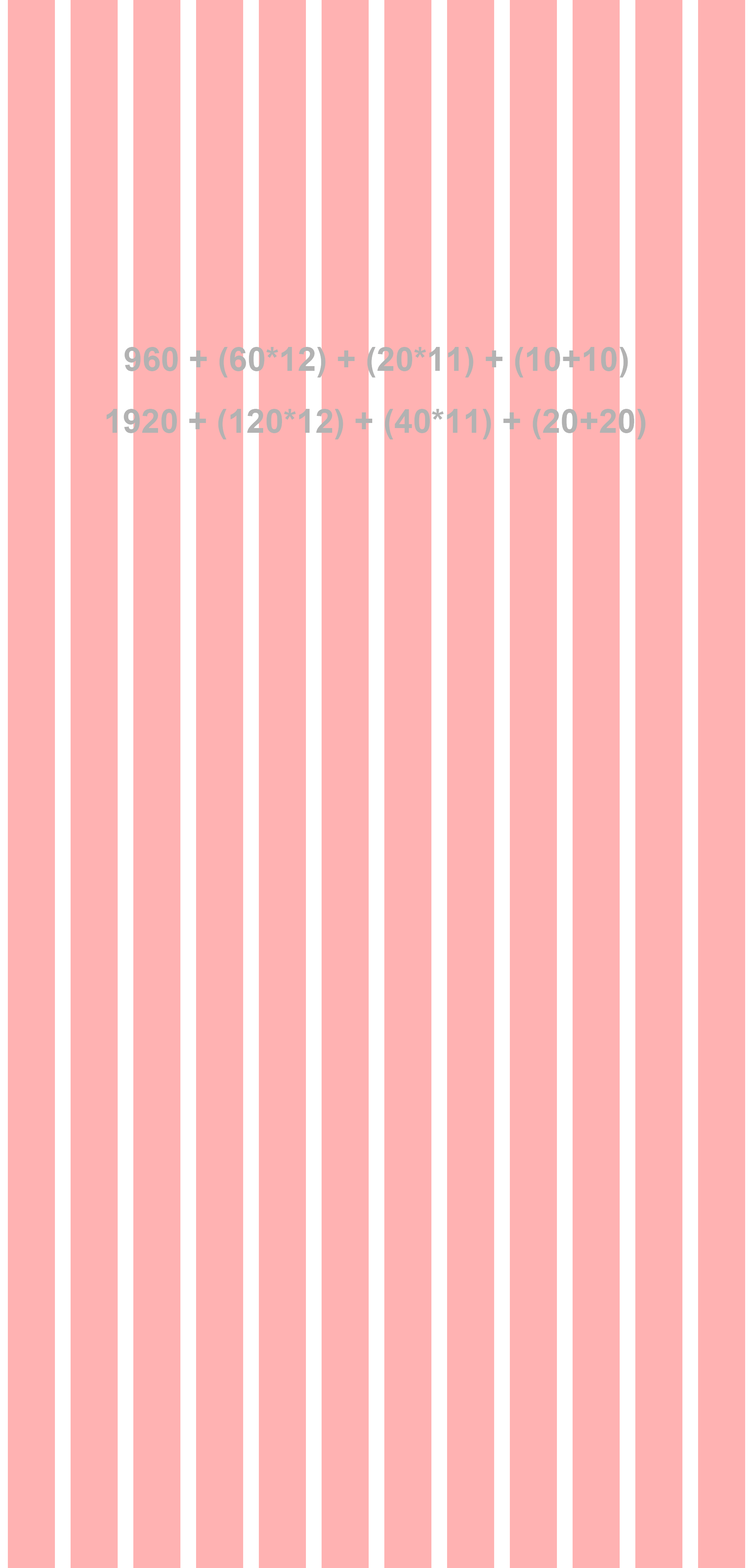
<style>
.page{position:relative;width:753px;height:1568px;background:#ffb2b2}
.page>*{position:absolute;margin:0}
.t1{font:33.4px "Arial-BoldMT";color:#b2b2b2}
</style>
<div class="page">
<p class="t1" style="left:124px;top:347px;width:504px;height:30px">960 + (60*12) + (20*11) + (10+10)</p>
<p class="t1" style="left:106px;top:409px;width:539px;height:30px">1920 + (120*12) + (40*11) + (20+20)</p>
</div>
